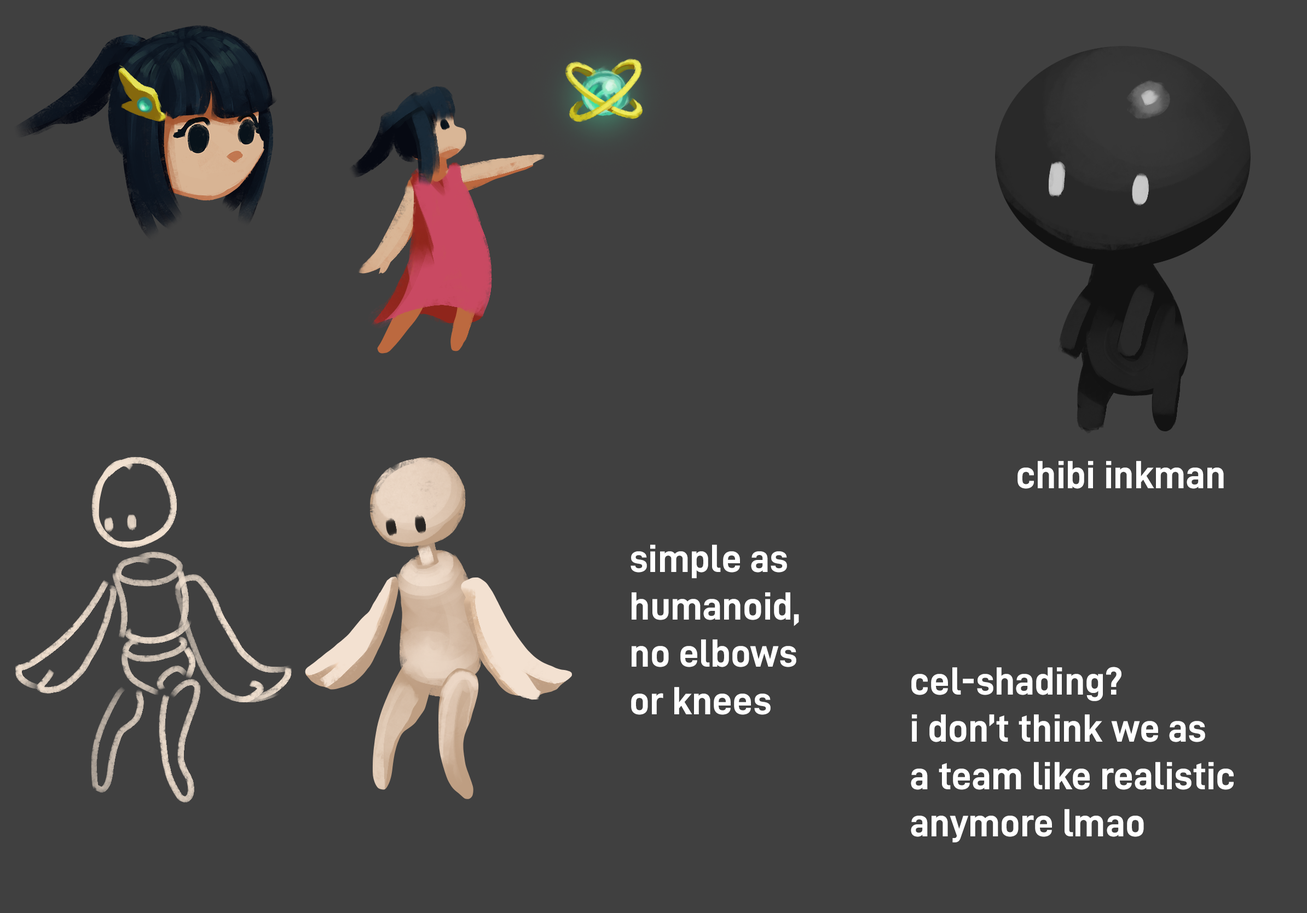
<style>
.page{position:relative;width:1307px;height:913px;background:#404040}
.page>*{position:absolute;margin:0}
.t1{font:39.4px "D-DIN-Bold";color:#ffffff}
</style>
<div class="page">
<p class="t1" style="left:1017px;top:461px;width:206px;height:28px">chibi inkman</p>
<p class="t1" style="left:630px;top:544px;width:169px;height:171px">simple as<br>humanoid,<br>no elbows <br>or knees</p>
<p class="t1" style="left:910px;top:666px;width:323px;height:176px">cel-shading?<br>i don’t think we as<br>a team like realistic<br>anymore lmao</p>
</div>
